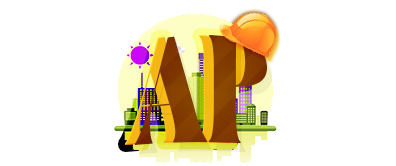
<style>
.page{position:relative;width:396px;height:166px;background:#ffffff}
.page>*{position:absolute;margin:0}
.t1{font:143.5px "Virgina";font-variant:small-caps;scale:0.81 1}
.t2{font:143.5px "Virgina";color:#823b00;font-variant:small-caps;scale:0.81 1}
</style>
<div class="page">
<p class="t1" style="left:125px;top:34px;width:133px;height:111px">AP</p>
<p class="t2" style="left:134px;top:34px;width:133px;height:111px">AP</p>
</div>
